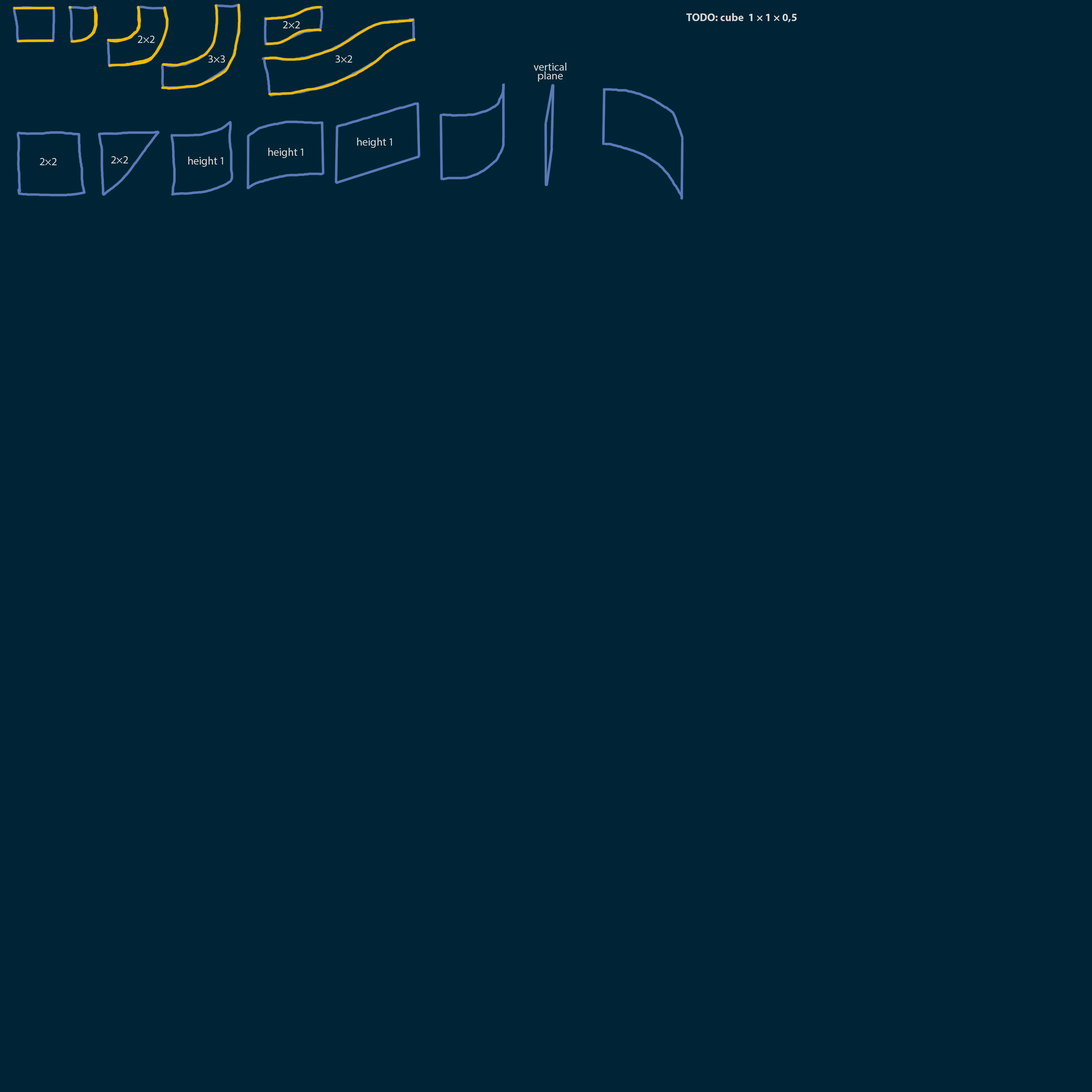
<style>
.page{position:relative;width:1092px;height:1092px;background:#002435}
.page>*{position:absolute;margin:0}
.t1{font:10.9px "MyriadPro-Bold";color:#d5d5d5}
.t2{font:10.9px "MyriadPro-Regular";color:#d5d5d5}
.t3{font:10.9px/8.7px "MyriadPro-Regular";color:#d5d5d5}
</style>
<div class="page">
<p class="t1" style="left:686px;top:13px;width:111px;height:9px">TODO: cube  1 × 1 × 0,5</p>
<p class="t2" style="left:283px;top:21px;width:17px;height:7px">2×2</p>
<p class="t2" style="left:138px;top:36px;width:17px;height:7px">2×2</p>
<p class="t2" style="left:208px;top:55px;width:17px;height:8px">3×3</p>
<p class="t2" style="left:335px;top:55px;width:17px;height:8px">3×2</p>
<p class="t3" style="left:534px;top:63px;width:32px;height:19px;text-align:center">vertical<br>plane</p>
<p class="t2" style="left:357px;top:138px;width:35px;height:10px">height 1</p>
<p class="t2" style="left:268px;top:148px;width:35px;height:10px">height 1</p>
<p class="t2" style="left:40px;top:158px;width:17px;height:7px">2×2</p>
<p class="t2" style="left:111px;top:156px;width:17px;height:7px">2×2</p>
<p class="t2" style="left:188px;top:157px;width:35px;height:10px">height 1</p>
</div>
